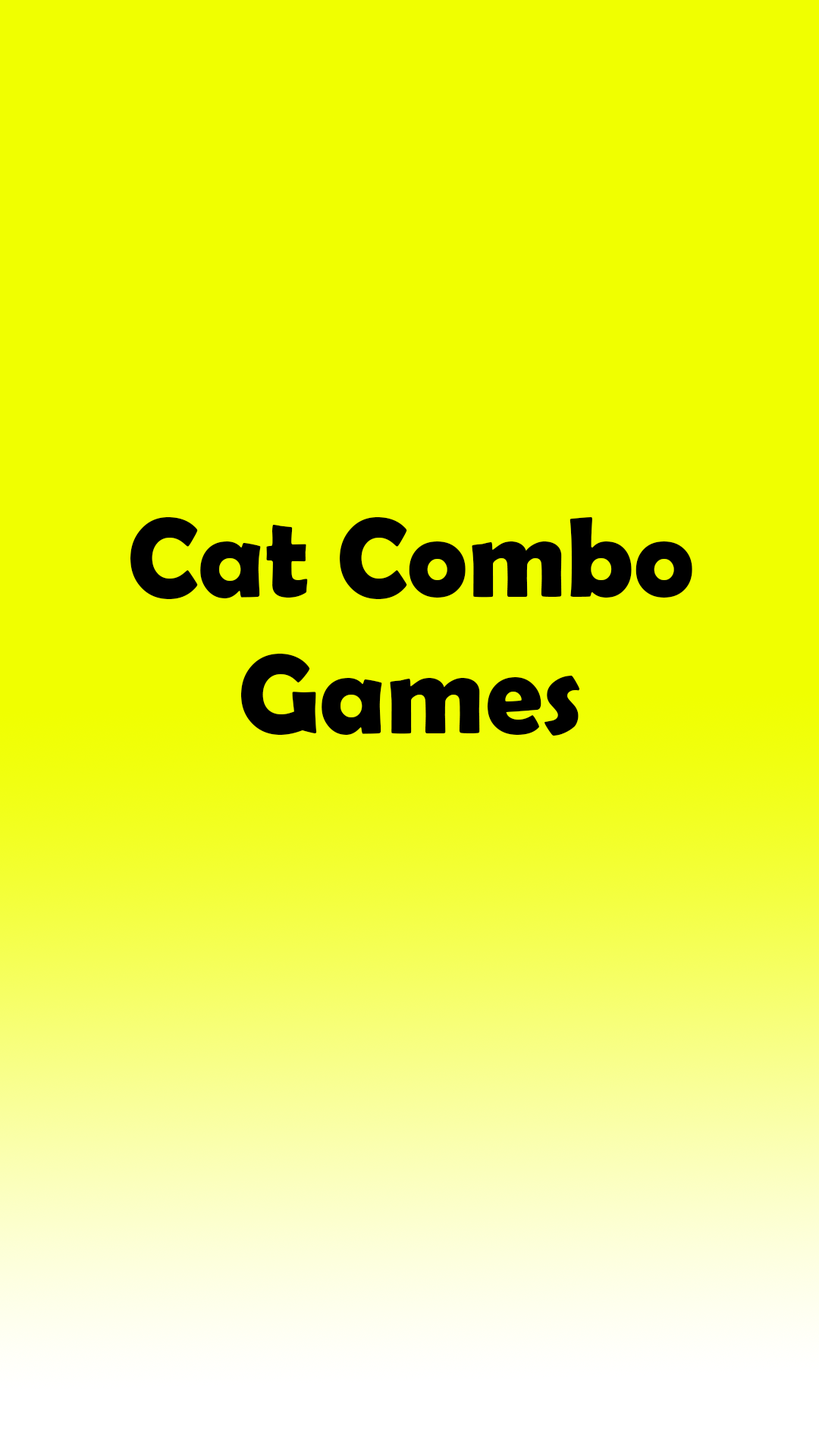
<style>
.page{position:relative;width:819px;height:1456px;background:#f0ff00}
.page>*{position:absolute;margin:0}
.t1{font:113.7px "BerlinSansFBDemi-Bold";color:#000000}
</style>
<div class="page">
<p class="t1" style="left:130px;top:517px;width:562px;height:219px;text-align:center">Cat Combo<br>Games</p>
</div>
